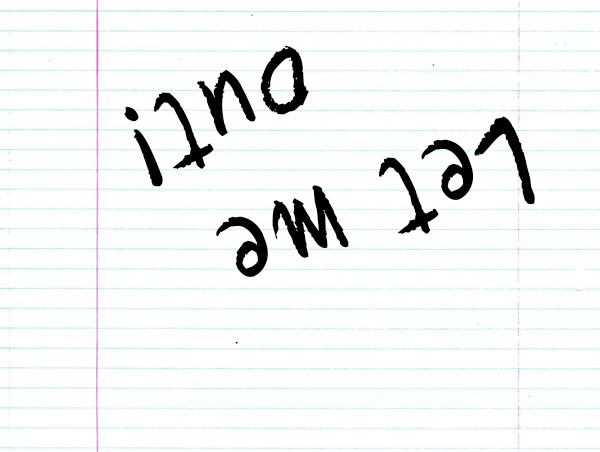
<style>
.page{position:relative;width:600px;height:452px;background:#ffffff}
.page>*{position:absolute;margin:0}
.t1{font:116.6px "Quikhand";letter-spacing:0.1em;color:#000000}
</style>
<div class="page">
<p class="t1" style="left:124px;top:45px;width:411px;height:232px;rotate:160deg">Let me <br>    out!</p>
</div>
